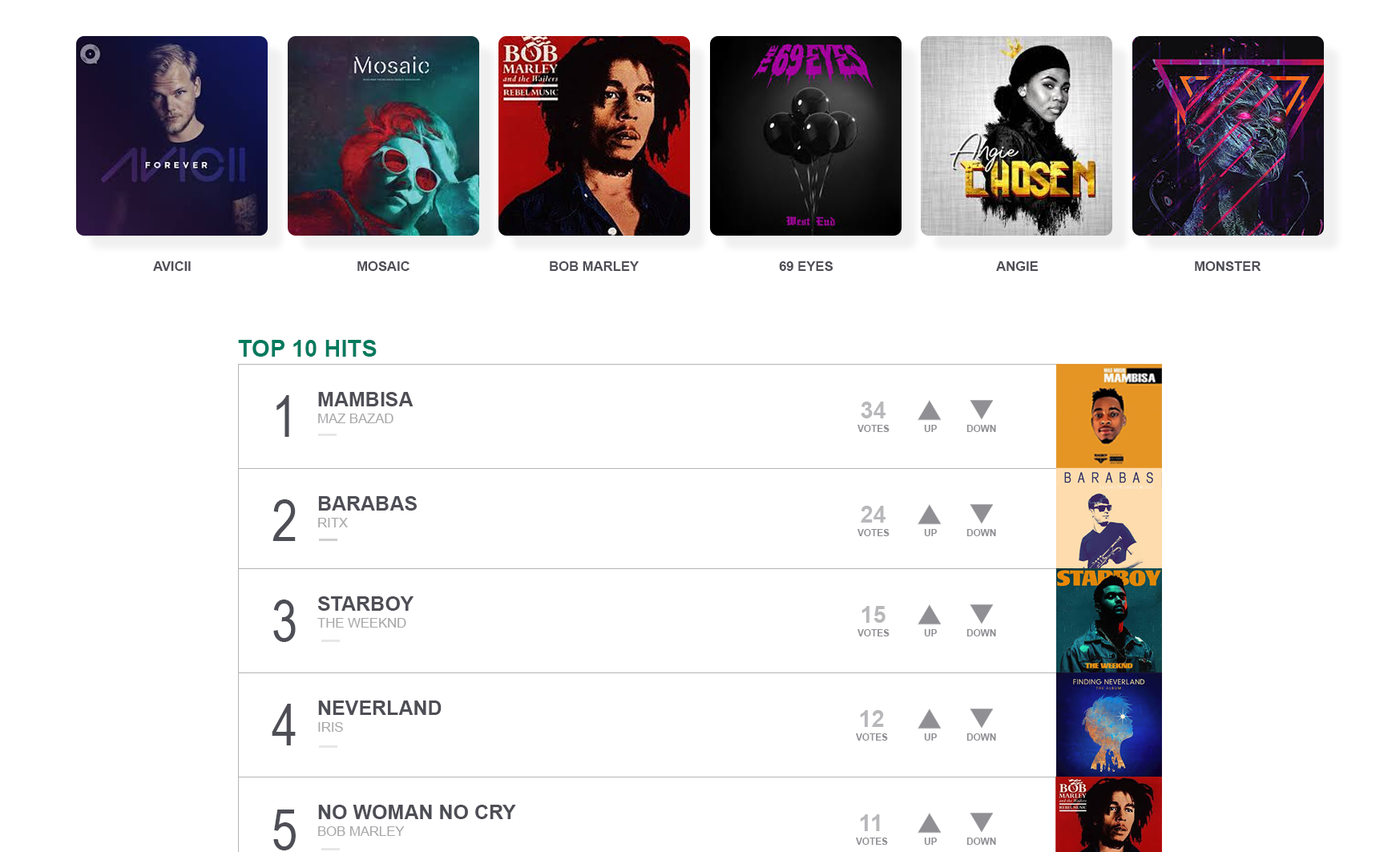
<style>
.page{position:relative;width:1400px;height:852px;background:#ffffff}
.page>*{position:absolute;margin:0}
.t1{font:13.4px "Arial-BoldMT";color:#4e4e56;text-transform:uppercase}
.t2{font:23.4px "Arial-BoldMT";color:#007a5e;text-transform:uppercase}
.t3{font:56.8px "ArialNarrow";color:#4e4e56;text-transform:uppercase}
.t4{font:20px "Arial-BoldMT";color:#4e4e56;text-transform:uppercase}
.t5{font:23.4px "Arial-BoldMT";color:#b8b8bb;text-transform:uppercase}
.t6{font:13.4px "ArialMT";color:#a9a9ac;text-transform:uppercase}
.t7{font:9.4px "Arial-BoldMT";color:#8f8f94;text-transform:uppercase}
</style>
<div class="page">
<p class="t1" style="left:153px;top:261px;width:38px;height:10px">avicii</p>
<p class="t1" style="left:357px;top:261px;width:52px;height:10px">mosaic</p>
<p class="t1" style="left:550px;top:261px;width:89px;height:10px">bob marley</p>
<p class="t1" style="left:779px;top:261px;width:54px;height:10px">69 eyes</p>
<p class="t1" style="left:996px;top:261px;width:42px;height:10px">angie</p>
<p class="t1" style="left:1195px;top:261px;width:66px;height:10px">monster</p>
<p class="t2" style="left:238px;top:340px;width:139px;height:17px">TOP 10 HITS</p>
<p class="t3" style="left:276px;top:395px;width:13px;height:42px">1</p>
<p class="t4" style="left:318px;top:392px;width:95px;height:14px">MAMBISA</p>
<p class="t5" style="left:861px;top:401px;width:24px;height:17px">34</p>
<p class="t6" style="left:318px;top:413px;width:75px;height:10px">mAZ BAZAD</p>
<p class="t7" style="left:857px;top:425px;width:32px;height:7px">VOTES</p>
<p class="t7" style="left:924px;top:425px;width:13px;height:7px">UP</p>
<p class="t7" style="left:966px;top:425px;width:30px;height:7px">DOWN</p>
<p class="t4" style="left:318px;top:496px;width:99px;height:14px">BARABAS</p>
<p class="t3" style="left:272px;top:499px;width:24px;height:42px">2</p>
<p class="t5" style="left:861px;top:506px;width:24px;height:16px">24</p>
<p class="t6" style="left:318px;top:518px;width:30px;height:9px">RITX</p>
<p class="t7" style="left:857px;top:529px;width:32px;height:7px">VOTES</p>
<p class="t7" style="left:924px;top:529px;width:13px;height:7px">UP</p>
<p class="t7" style="left:966px;top:529px;width:30px;height:7px">DOWN</p>
<p class="t3" style="left:273px;top:599px;width:23px;height:43px">3</p>
<p class="t4" style="left:317px;top:596px;width:96px;height:15px">STARBOY</p>
<p class="t5" style="left:861px;top:606px;width:24px;height:17px">15</p>
<p class="t6" style="left:317px;top:618px;width:89px;height:9px">THE WEEKND</p>
<p class="t7" style="left:857px;top:629px;width:32px;height:7px">VOTES</p>
<p class="t7" style="left:924px;top:629px;width:13px;height:7px">UP</p>
<p class="t7" style="left:966px;top:629px;width:30px;height:7px">DOWN</p>
<p class="t4" style="left:318px;top:700px;width:124px;height:15px">NEVERLAND</p>
<p class="t3" style="left:272px;top:704px;width:24px;height:41px">4</p>
<p class="t5" style="left:860px;top:710px;width:24px;height:17px">12</p>
<p class="t6" style="left:318px;top:722px;width:25px;height:10px">IRIS</p>
<p class="t7" style="left:856px;top:733px;width:32px;height:7px">VOTES</p>
<p class="t7" style="left:924px;top:733px;width:13px;height:7px">UP</p>
<p class="t7" style="left:966px;top:733px;width:30px;height:7px">DOWN</p>
<p class="t3" style="left:273px;top:809px;width:23px;height:41px">5</p>
<p class="t4" style="left:318px;top:805px;width:198px;height:14px">NO WOMAN NO CRY</p>
<p class="t5" style="left:860px;top:814px;width:20px;height:17px">11</p>
<p class="t6" style="left:318px;top:826px;width:87px;height:10px">BOB MARLEY</p>
<p class="t7" style="left:856px;top:837px;width:32px;height:8px">VOTES</p>
<p class="t7" style="left:924px;top:837px;width:13px;height:8px">UP</p>
<p class="t7" style="left:966px;top:837px;width:30px;height:8px">DOWN</p>
</div>
